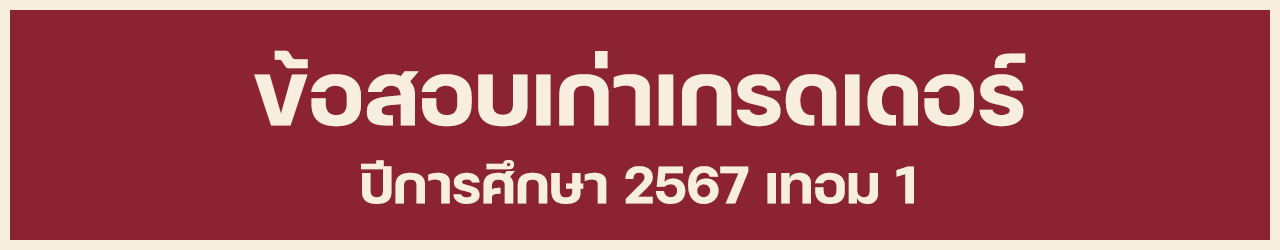
<style>
.page{position:relative;width:1280px;height:250px;background:#8b2332}
.page>*{position:absolute;margin:0}
.t1{font:120px "FCMinimalBold";color:#f8eedf}
.t2{font:72px "FCMinimalBold";color:#f8eedf}
</style>
<div class="page">
<p class="t1" style="left:254px;top:50px;width:772px;height:77px">ข้อสอบเก่าเกรดเดอร์</p>
<p class="t2" style="left:361px;top:160px;width:553px;height:44px">ปีการศึกษา 2567 เทอม 1</p>
</div>
